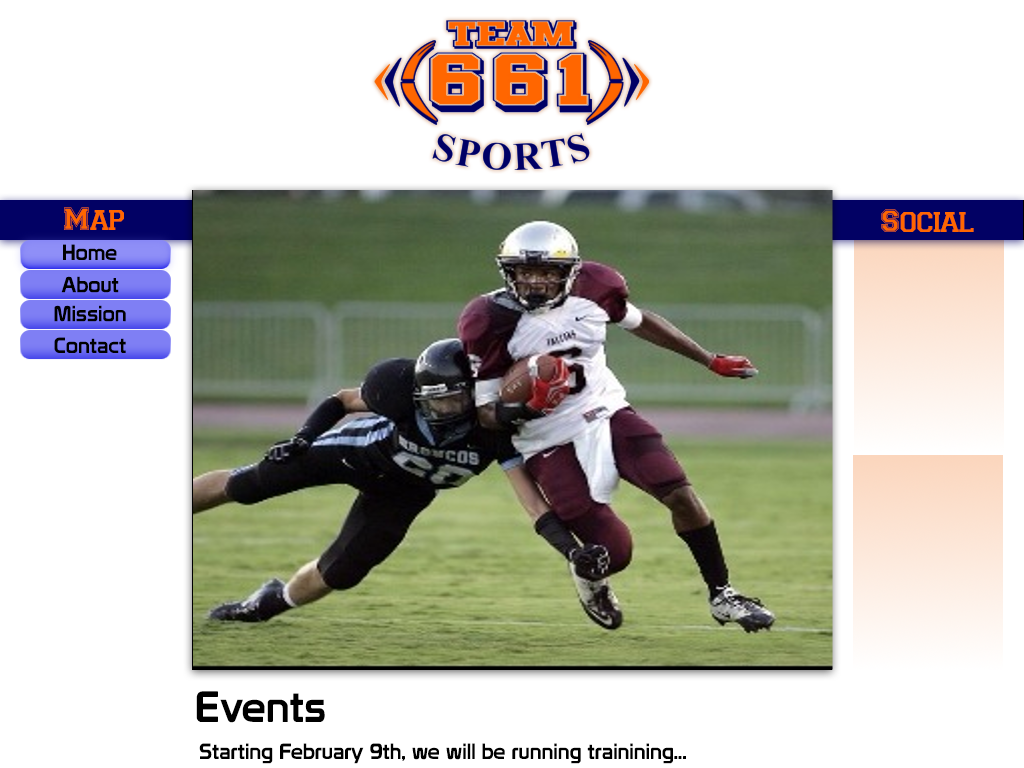
<style>
.page{position:relative;width:1024px;height:768px;background:#ffffff}
.page>*{position:absolute;margin:0}
.t1{font:32.1px "Varsity-Regular";color:#ff6600}
.t2{font:21.4px "Prototype";color:#000000}
.t3{font:42.8px "Prototype";color:#000000}
</style>
<div class="page">
<p class="t1" style="left:64px;top:207px;width:60px;height:23px">Map</p>
<p class="t1" style="left:881px;top:209px;width:93px;height:23px">Social</p>
<p class="t2" style="left:63px;top:244px;width:54px;height:16px">Home</p>
<p class="t2" style="left:61px;top:276px;width:58px;height:17px">About</p>
<p class="t2" style="left:54px;top:305px;width:72px;height:17px">Mission</p>
<p class="t2" style="left:54px;top:337px;width:72px;height:16px">Contact</p>
<p class="t3" style="left:196px;top:691px;width:129px;height:32px">Events</p>
<p class="t2" style="left:199px;top:743px;width:487px;height:21px">Starting February 9th, we will be running trainining...</p>
</div>
